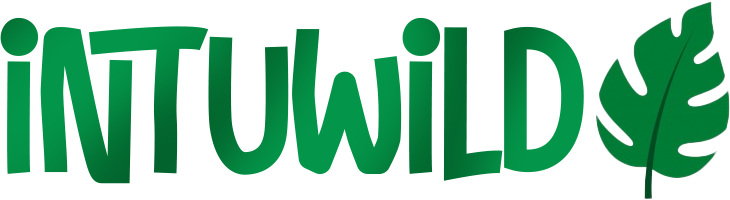
<style>
.page{position:relative;width:730px;height:200px;background:#ffffff}
.page>*{position:absolute;margin:0}
.t1{font:208.3px "NaughtyMonsterRegular";color:#038a43}
</style>
<div class="page">
<p class="t1" style="left:0px;top:17px;width:584px;height:167px">IntuWild</p>
</div>
